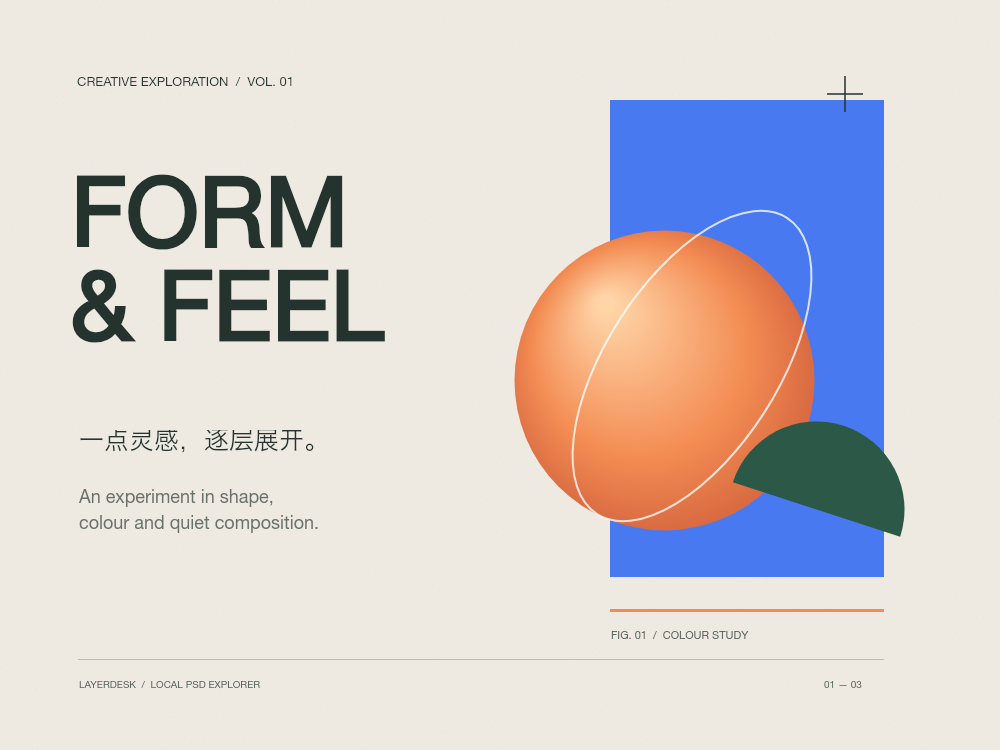
<style>
.page{position:relative;width:1000px;height:750px;background:#eeeae2}
.page>*{position:absolute;margin:0}
.t1{font:13px/13.8px "HelveticaNeue";color:#24332e}
.t2{font:96px/94px "HelveticaNeue-Bold";color:#24332e}
.t3{font:25px/26.5px "HiraginoSansGB-W3";color:#24332e}
.t4{font:18px/26px "HelveticaNeue";color:#68726a}
.t5{font:11px/11.7px "HelveticaNeue";color:#536159}
.t6{font:10px/10.6px "HelveticaNeue";color:#536159}
</style>
<div class="page">
<p class="t1" style="left:76px;top:75px;width:450px;height:24px">CREATIVE EXPLORATION  /  VOL. 01</p>
<p class="t2" style="left:70px;top:169px;width:474px;height:232px">FORM<br>&amp; FEEL</p>
<p class="t3" style="left:78px;top:430px;width:380px;height:45px">一点灵感，逐层展开。</p>
<p class="t4" style="left:78px;top:489px;width:380px;height:62px">An experiment in shape,<br>colour and quiet composition.</p>
<p class="t5" style="left:610px;top:630px;width:300px;height:22px">FIG. 01  /  COLOUR STUDY</p>
<p class="t6" style="left:78px;top:680px;width:500px;height:20px">LAYERDESK  /  LOCAL PSD EXPLORER</p>
<p class="t6" style="left:823px;top:680px;width:80px;height:20px">01 — 03</p>
</div>
